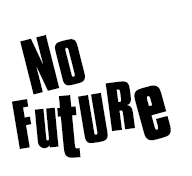
<style>
.page{position:relative;width:192px;height:176px;background:#ffffff}
.page>*{position:absolute;margin:0}
.t1{font:82.2px "CompactaStd-Bold";color:#000000}
.t2{font:72.3px "CompactaStd-Bold";color:#000000}
.t3{font:96.7px "CompactaStd-Bold";color:#000000}
.t4{font:94.2px "CompactaStd-Bold";color:#000000}
</style>
<div class="page">
<p class="t1" style="left:20px;top:34px;width:65px;height:61px;rotate:-14deg">No</p>
<p class="t2" style="left:105px;top:81px;width:30px;height:51px;rotate:-8deg">R</p>
<p class="t3" style="left:134px;top:85px;width:37px;height:56px;rotate:-15deg">e</p>
<p class="t2" style="left:11px;top:99px;width:21px;height:50px;rotate:-9deg">F</p>
<p class="t4" style="left:57px;top:95px;width:24px;height:63px;rotate:-5deg">t</p>
<p class="t2" style="left:78px;top:92px;width:30px;height:51px;rotate:-9deg">U</p>
<p class="t2" style="left:34px;top:107px;width:25px;height:42px;rotate:-5deg">u</p>
</div>
